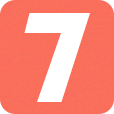
<style>
.page{position:relative;width:114px;height:114px;background:#ffffff}
.page>*{position:absolute;margin:0}
.t1{font:130px "Mouser";letter-spacing:0.025em;color:#ffffff}
</style>
<div class="page">
<p class="t1" style="left:24px;top:13px;width:66px;height:89px">7</p>
</div>
